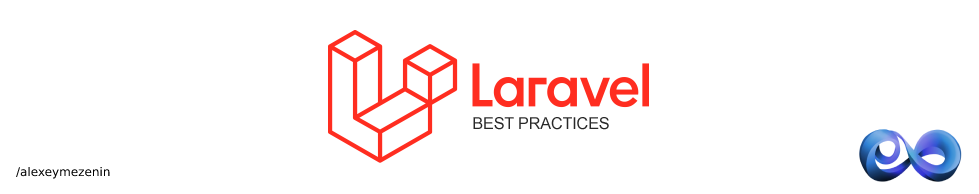
<style>
.page{position:relative;width:979px;height:194px;background:#ffffff}
.page>*{position:absolute;margin:0}
.t1{font:16.1px "ArialMT";letter-spacing:-0.007em;color:#282828;text-transform:uppercase}
.t2{font:12px "DejaVuSans";color:#000000}
</style>
<div class="page">
<p class="t1" style="left:473px;top:117px;width:136px;height:13px">Best Practices</p>
<p class="t2" style="left:16px;top:166px;width:94px;height:13px">/alexeymezenin</p>
</div>
